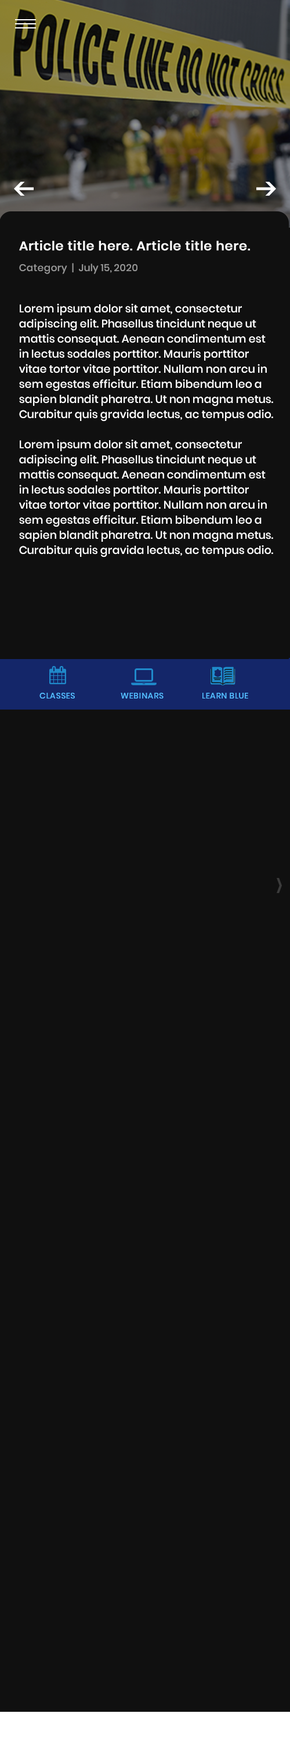
<style>
.page{position:relative;width:290px;height:1742px;background:#101010}
.page>*{position:absolute;margin:0}
.t1{font:12.8px "Poppins-Medium";color:#ffffff;font-weight:bold}
.t2{font:9.9px "Poppins-Medium";color:#959595}
.t3{font:11px/15.1px "Poppins-Medium";color:#ffffff}
.t4{font:8.1px "Poppins-Medium";letter-spacing:0.04em;color:#53bdff;text-transform:uppercase}
</style>
<div class="page">
<p class="t1" style="left:19px;top:240px;width:231px;height:11px">Article title here. Article title here.</p>
<p class="t2" style="left:19px;top:263px;width:119px;height:11px">Category  |  July 15, 2020</p>
<p class="t3" style="left:19px;top:304px;width:254px;height:253px">Lorem ipsum dolor sit amet, consectetur adipiscing elit. Phasellus tincidunt neque ut mattis consequat. Aenean condimentum est in lectus sodales porttitor. Mauris porttitor vitae tortor vitae porttitor. Nullam non arcu in sem egestas efficitur. Etiam bibendum leo a sapien blandit pharetra. Ut non magna metus. Curabitur quis gravida lectus, ac tempus odio.<br><br>Lorem ipsum dolor sit amet, consectetur adipiscing elit. Phasellus tincidunt neque ut mattis consequat. Aenean condimentum est in lectus sodales porttitor. Mauris porttitor vitae tortor vitae porttitor. Nullam non arcu in sem egestas efficitur. Etiam bibendum leo a sapien blandit pharetra. Ut non magna metus. Curabitur quis gravida lectus, ac tempus odio.</p>
<p class="t4" style="left:39px;top:693px;width:36px;height:6px">classes</p>
<p class="t4" style="left:121px;top:693px;width:43px;height:6px">webinars</p>
<p class="t4" style="left:203px;top:693px;width:46px;height:6px">learn blue</p>
</div>
